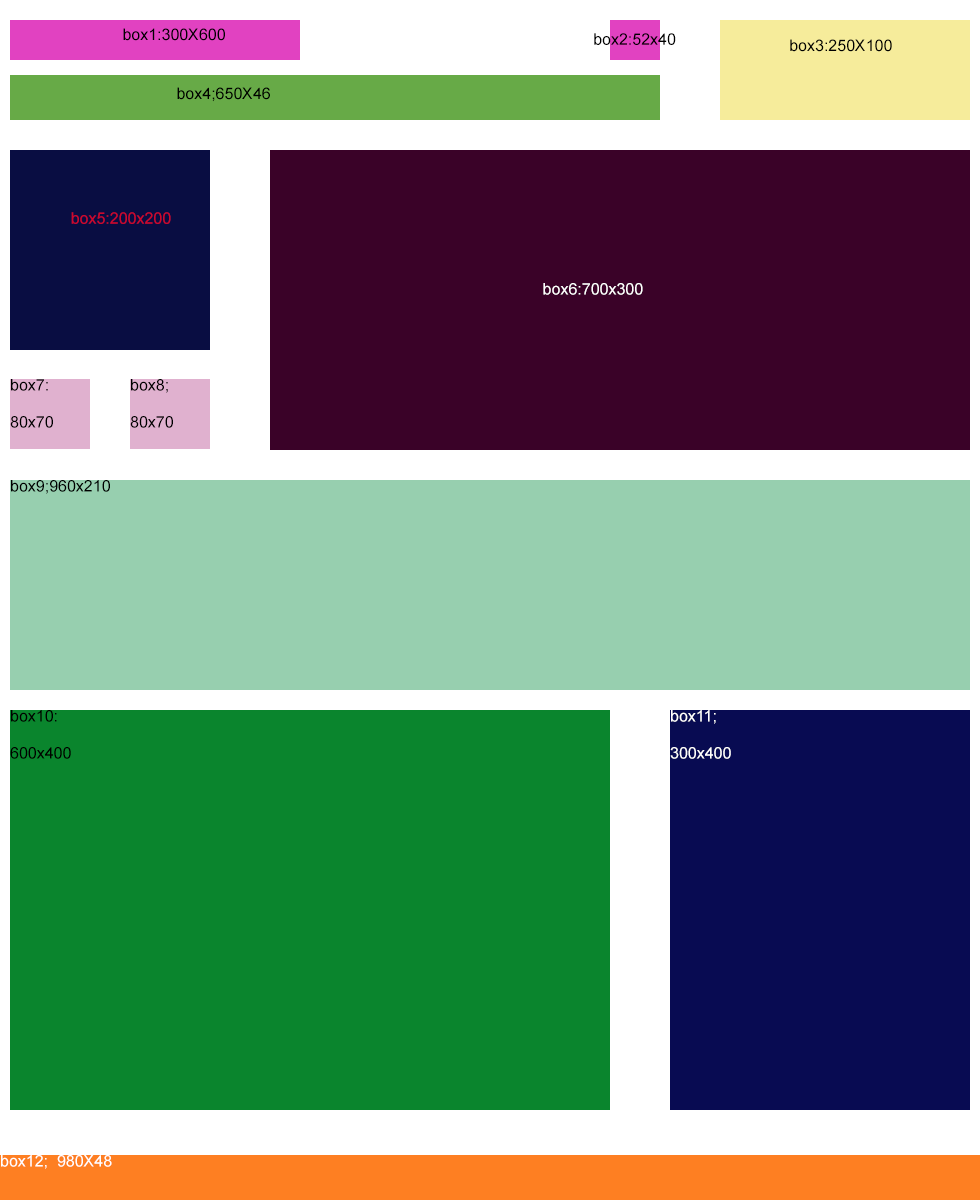
<style>
.page{position:relative;width:980px;height:1200px;background:#ffffff}
.page>*{position:absolute;margin:0}
.t1{font:16px "ArialMT";color:#000000}
.t2{font:16px "ArialMT";color:#cd082b}
.t3{font:16px "ArialMT";color:#ffffff}
.t4{font:16px/37px "ArialMT";color:#000000}
.t5{font:16px/37px "ArialMT";color:#ffffff}
</style>
<div class="page">
<p class="t1" style="left:123px;top:28px;width:102px;height:13px">box1:300X600</p>
<p class="t1" style="left:594px;top:33px;width:82px;height:12px">box2:52x40</p>
<p class="t1" style="left:790px;top:39px;width:102px;height:13px">box3:250X100</p>
<p class="t1" style="left:177px;top:87px;width:93px;height:15px">box4;650X46</p>
<p class="t2" style="left:71px;top:212px;width:100px;height:12px">box5:200x200</p>
<p class="t3" style="left:543px;top:283px;width:100px;height:12px">box6:700x300</p>
<p class="t4" style="left:10px;top:379px;width:43px;height:49px">box7: 80x70</p>
<p class="t4" style="left:130px;top:379px;width:43px;height:49px">box8;<br>80x70</p>
<p class="t1" style="left:11px;top:480px;width:99px;height:14px">box9;960x210</p>
<p class="t4" style="left:10px;top:710px;width:61px;height:49px">box10:<br>600x400</p>
<p class="t5" style="left:670px;top:710px;width:61px;height:49px">box11;<br>300x400</p>
<p class="t3" style="left:1px;top:1155px;width:111px;height:14px">box12;  980X48</p>
</div>
